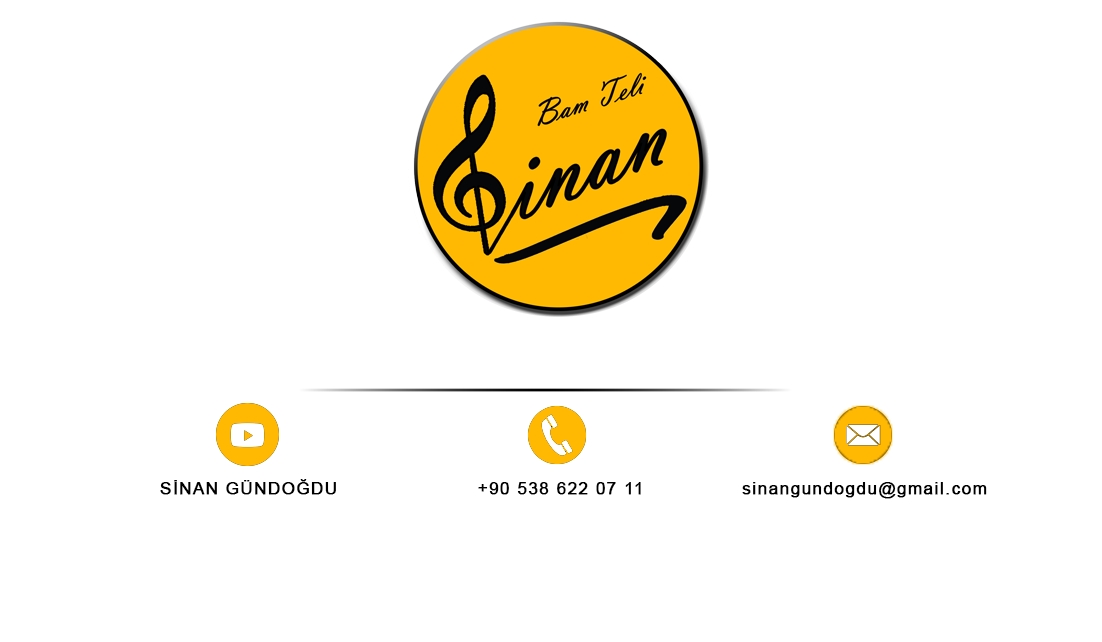
<style>
.page{position:relative;width:1102px;height:642px;background:#ffffff}
.page>*{position:absolute;margin:0}
.t1{font:16.7px "ArialMT";letter-spacing:0.075em;color:#000000;font-weight:bold}
</style>
<div class="page">
<p class="t1" style="left:160px;top:479px;width:176px;height:16px">SİNAN GÜNDOĞDU</p>
<p class="t1" style="left:478px;top:482px;width:163px;height:13px">+90 538 622 07 11</p>
<p class="t1" style="left:742px;top:482px;width:245px;height:17px">sinangundogdu@gmail.com</p>
</div>
